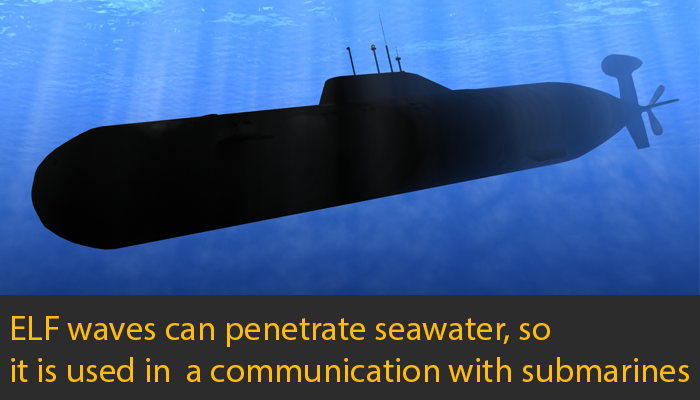
<style>
.page{position:relative;width:700px;height:400px;background:#2c2c2c}
.page>*{position:absolute;margin:0}
.t1{font:35px "MyriadPro-Regular";color:#ffbc09}
</style>
<div class="page">
<p class="t1" style="left:11px;top:316px;width:678px;height:66px">ELF waves can penetrate seawater, so <br>it is used in  a communication with submarines</p>
</div>
